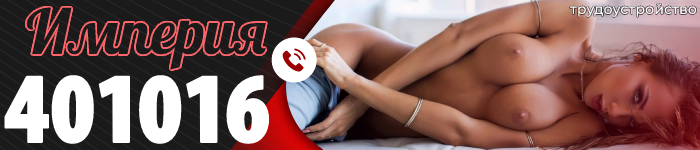
<style>
.page{position:relative;width:700px;height:150px}
.page>*{position:absolute;margin:0}
.t1{font:14.3px "Montserrat-Medium";color:#ffffff}
.t2{font:103px "Santana-BlackCondensed";color:#ffffff}
</style>
<div class="page">
<p class="t1" style="left:569px;top:3px;width:128px;height:14px">трудоустройство</p>
<p class="t2" style="left:4px;top:75px;width:266px;height:69px">401016</p>
</div>
